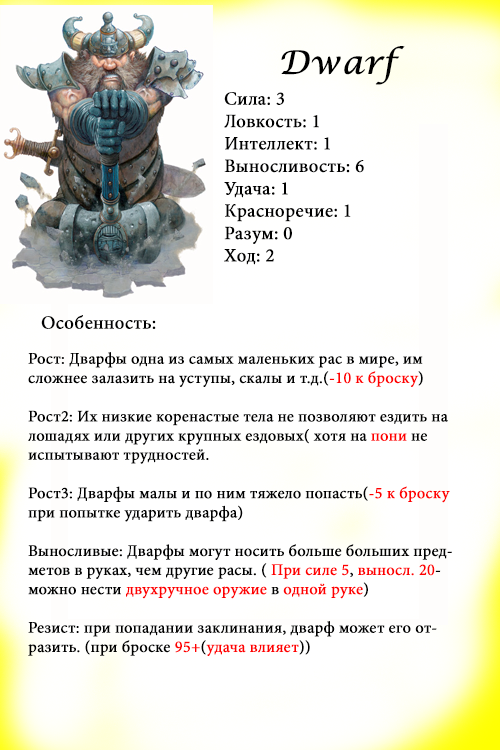
<style>
.page{position:relative;width:500px;height:750px;background:#ffffff}
.page>*{position:absolute;margin:0}
.t1{font:32px "LucidaCalligraphy-Italic";color:#000000;font-weight:bold}
.t2{font:18.7px "MinionPro-Regular";color:#000000;font-weight:bold}
.t3{font:16px "MinionPro-Regular";color:#000000;font-weight:bold}
.t4{font:16px "MinionPro-Regular";color:#ff0000;font-weight:bold}
.t5{font:16px "MinionPro-Regular";color:#fe0000;font-weight:bold}
</style>
<div class="page">
<p class="t1" style="left:281px;top:46px;width:124px;height:39px">Dwarf</p>
<p class="t2" style="left:224px;top:92px;width:140px;height:173px">Сила: 3<br>Ловкость: 1<br>Интеллект: 1<br>Выносливость: 6<br>Удача: 1<br>Красноречие: 1<br>Разум: 0<br>Ход: 2</p>
<p class="t2" style="left:41px;top:315px;width:115px;height:14px">Особенность:</p>
<p class="t3" style="left:28px;top:352px;width:424px;height:304px">Рост: Дварфы одна из самых маленьких рас в мире, им сложнее залазить на уступы, скалы и т.д.(<span class="t4">-10 к броску</span>)<br><br>Рост2: Их низкие коренастые тела не позволяют ездить на лошадях или других крупных ездовых( хотя на <span class="t4">пони</span> не испытывают трудностей.<br><br>Рост3: Дварфы малы и по ним тяжело попасть(<span class="t4">-5 к броску</span> при попытке ударить дварфа)<br><br>Выносливые: Дварфы могут носить больше больших предметов в руках, чем другие расы. ( <span class="t4">При силе 5</span>, <span class="t5">выносл. 20</span>-  можно нести <span class="t5">двухручное оружие</span> в <span class="t4">одной руке</span>)<br><br>Резист: при попадании заклинания, дварф может его отразить. (при броске <span class="t4">95+</span>(<span class="t4">удача влияет</span>))</p>
</div>
